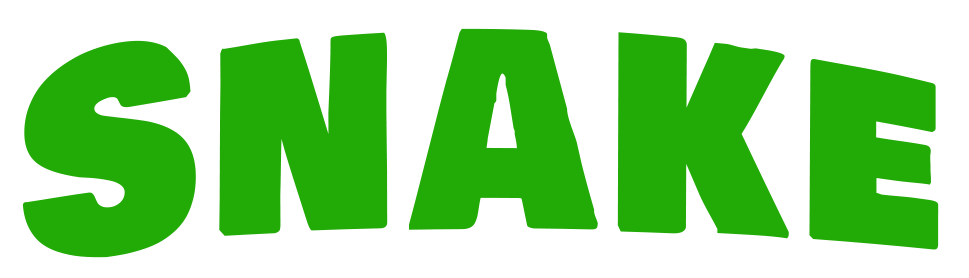
<style>
.page{position:relative;width:969px;height:278px;background:#ffffff}
.page>*{position:absolute;margin:0}
.t1{font:250px "BowlbyOneSC-Regular";letter-spacing:0.05em;color:#22aa07}
</style>
<div class="page">
<p class="t1" style="left:22px;top:28px;width:917px;height:230px">Snake</p>
</div>
